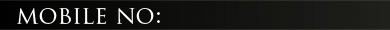
<style>
.page{position:relative;width:390px;height:30px}
.page>*{position:absolute;margin:0}
.t1{font:24px "TrajanPro-Regular";color:#ffffff}
</style>
<div class="page">
<p class="t1" style="left:17px;top:8px;width:143px;height:16px">mobile no:</p>
</div>
